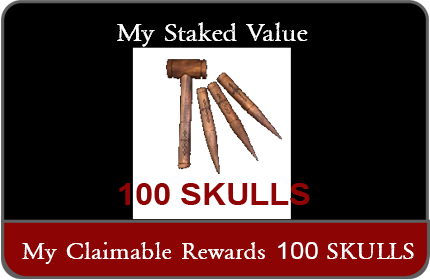
<style>
.page{position:relative;width:430px;height:280px;background:#000000}
.page>*{position:absolute;margin:0}
.t1{font:26.4px "NIGHTMAREPILLS";color:#ffffff;scale:1.09 1}
.t2{font:30px "Arial-BoldMT";color:#8f0404;scale:1.09 1}
.t3{font:24.3px "NIGHTMAREPILLS";color:#ffffff;scale:1.09 1}
.t4{font:24.3px "ArialMT";color:#ffffff;scale:1.09 1}
</style>
<div class="page">
<p class="t1" style="left:117px;top:22px;width:191px;height:25px">My Staked Value</p>
<p class="t2" style="left:119px;top:183px;width:191px;height:22px">100 SKULLS</p>
<p class="t3" style="left:22px;top:242px;width:392px;height:22px">My Claimable Rewards <span class="t4">100 </span>SKULLS</p>
</div>
